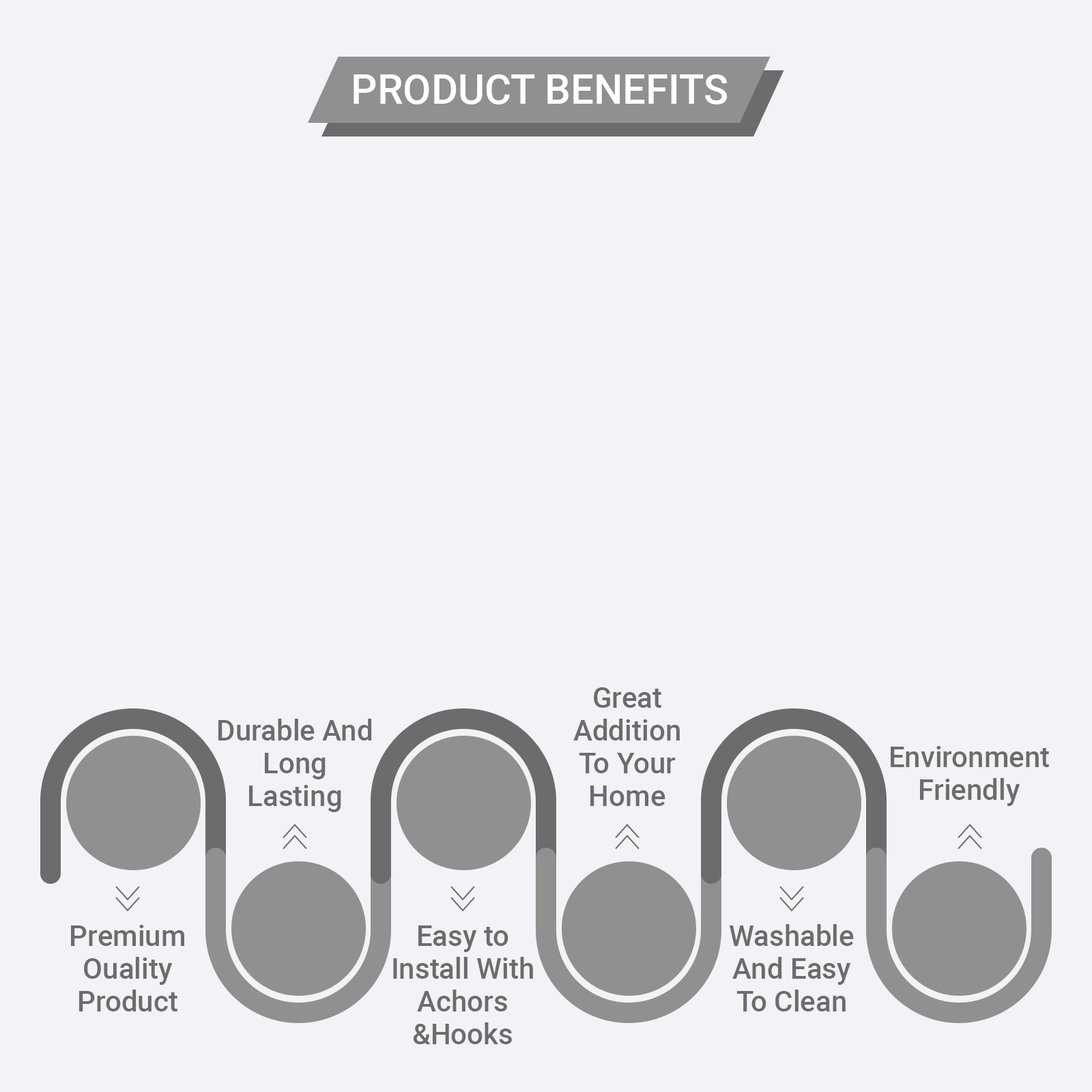
<style>
.page{position:relative;width:1092px;height:1092px;background:#f2f3f6}
.page>*{position:absolute;margin:0}
.t1{font:40.9px "Roboto-Medium";color:#ffffff}
.t2{font:28.7px/32.8px "Roboto-Medium";color:#6c6c6c}
</style>
<div class="page">
<p class="t1" style="left:354px;top:74px;width:373px;height:30px">PRODUCT BENEFITS</p>
<p class="t2" style="left:573px;top:687px;width:107px;height:119px;text-align:center">Great<br>Addition<br>To Your<br>Home</p>
<p class="t2" style="left:218px;top:719px;width:154px;height:93px;text-align:center">Durable And<br>Long<br>Lasting</p>
<p class="t2" style="left:891px;top:746px;width:158px;height:60px;text-align:center">Environment<br>Friendly</p>
<p class="t2" style="left:71px;top:925px;width:113px;height:86px;text-align:center">Premium<br>Ouality<br>Product</p>
<p class="t2" style="left:393px;top:925px;width:140px;height:119px;text-align:center">Easy to<br>Install With<br>Achors<br>&amp;Hooks</p>
<p class="t2" style="left:730px;top:924px;width:124px;height:87px;text-align:center">Washable<br>And Easy<br>To Clean</p>
</div>
